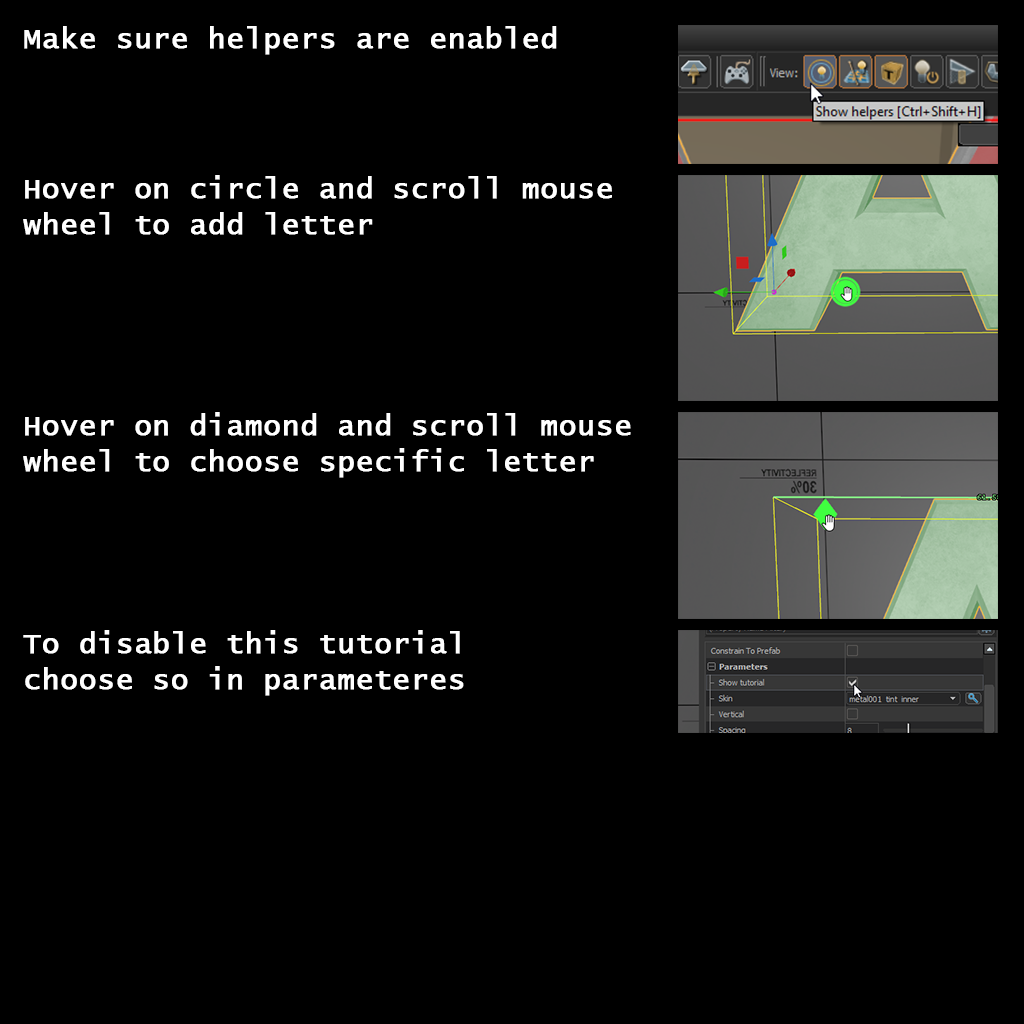
<style>
.page{position:relative;width:1024px;height:1024px;background:#000000}
.page>*{position:absolute;margin:0}
.t1{font:29.3px "LucidaConsole";color:#ffffff;font-weight:bold}
</style>
<div class="page">
<p class="t1" style="left:24px;top:26px;width:533px;height:29px">Make sure helpers are enabled</p>
<p class="t1" style="left:23px;top:175px;width:589px;height:60px">Hover on circle and scroll mouse<br>wheel to add letter</p>
<p class="t1" style="left:23px;top:412px;width:608px;height:66px">Hover on diamond and scroll mouse<br>wheel to choose specific letter</p>
<p class="t1" style="left:23px;top:630px;width:441px;height:66px">To disable this tutorial<br>choose so in parameteres</p>
</div>
